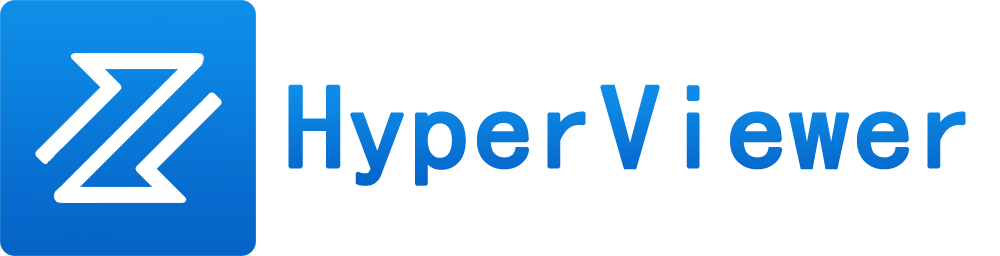
<style>
.page{position:relative;width:1000px;height:256px;background:#ffffff}
.page>*{position:absolute;margin:0}
.t1{font:120px "SimHei";color:#0a79d9;font-weight:bold}
</style>
<div class="page">
<p class="t1" style="left:288px;top:84px;width:678px;height:102px">HyperViewer</p>
</div>
